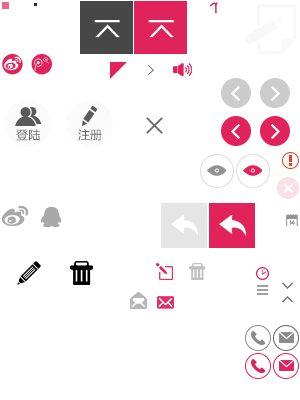
<style>
.page{position:relative;width:300px;height:400px;background:#ffffff}
.page>*{position:absolute;margin:0}
.t1{font:12px "MicrosoftYaHei";color:#666666;text-transform:uppercase}
</style>
<div class="page">
<p class="t1" style="left:16px;top:129px;width:24px;height:12px">登陆</p>
<p class="t1" style="left:78px;top:129px;width:24px;height:12px">注册</p>
</div>
